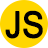
<style>
.page{position:relative;width:48px;height:48px;background:#ffd600}
.page>*{position:absolute;margin:0}
.t1{font:36px "MicrosoftSansSerif";color:#000001;font-weight:bold;scale:0.9 1}
</style>
<div class="page">
<p class="t1" style="left:5px;top:10px;width:38px;height:29px">JS</p>
</div>
